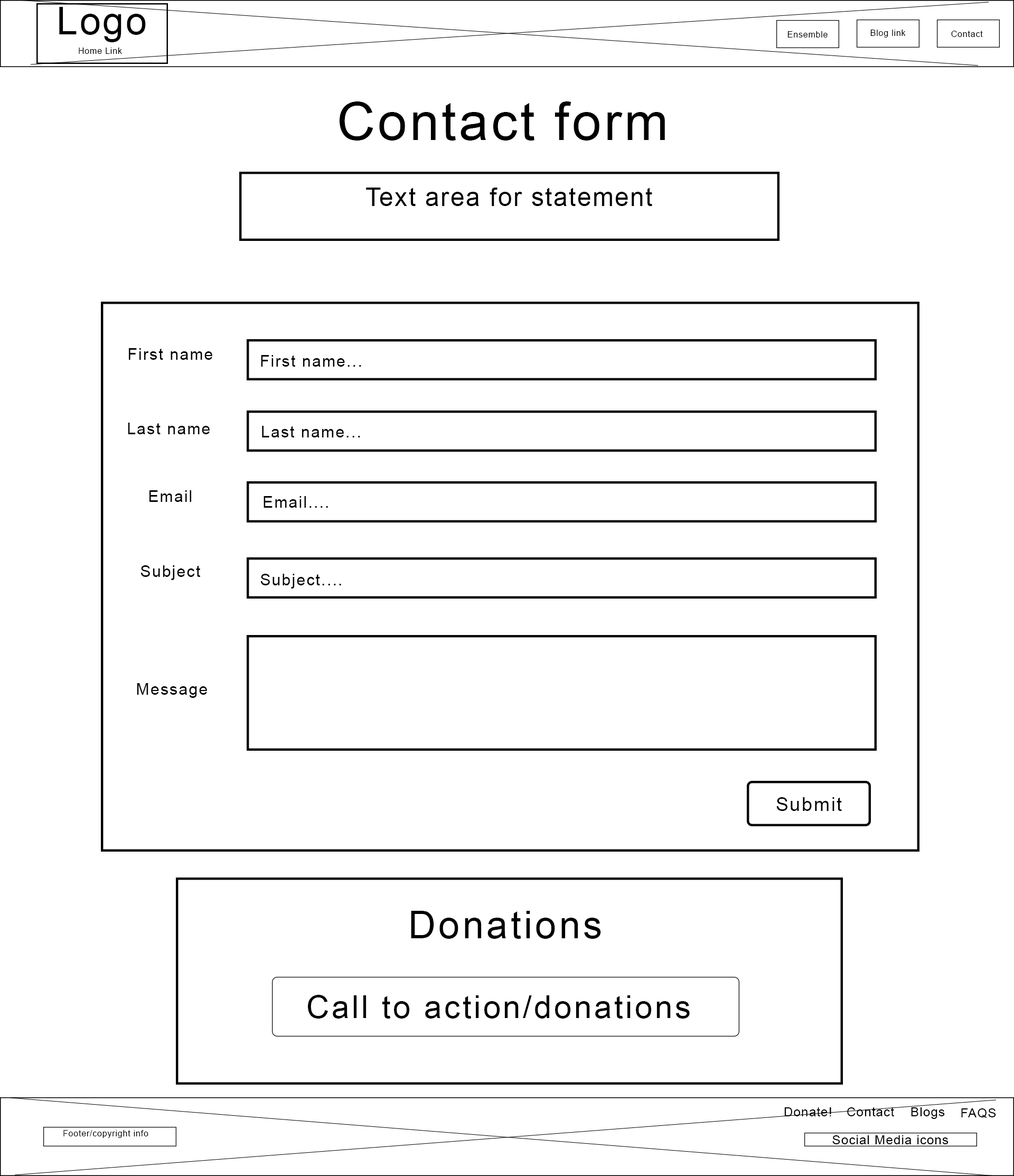
<style>
.page{position:relative;width:1014px;height:1176px;background:#ffffff}
.page>*{position:absolute;margin:0}
.t1{font:38px "ArialMT";letter-spacing:0.05em;color:#000000}
.t2{font:8.5px "ArialMT";letter-spacing:0.05em;color:#000000}
.t3{font:52.8px "ArialMT";letter-spacing:0.05em;color:#000000}
.t4{font:25.4px "ArialMT";letter-spacing:0.05em;color:#000000}
.t5{font:15.8px "ArialMT";letter-spacing:0.075em;color:#000000}
.t6{font:19px "ArialMT";letter-spacing:0.075em;color:#000000}
.t7{font:38px "ArialMT";letter-spacing:0.075em;color:#000000}
.t8{font:31.7px "ArialMT";letter-spacing:0.075em;color:#000000}
.t9{font:12.7px "ArialMT";letter-spacing:0.05em;color:#000000}
</style>
<div class="page">
<p class="t1" style="left:59px;top:7px;width:87px;height:35px">Logo</p>
<p class="t2" style="left:870px;top:30px;width:36px;height:8px">Blog link</p>
<p class="t2" style="left:788px;top:31px;width:40px;height:7px">Ensemble</p>
<p class="t2" style="left:951px;top:31px;width:32px;height:6px">Contact</p>
<p class="t2" style="left:79px;top:48px;width:43px;height:6px">Home Link</p>
<p class="t3" style="left:339px;top:101px;width:326px;height:40px">Contact form</p>
<p class="t4" style="left:366px;top:188px;width:286px;height:18px">Text area for statement</p>
<p class="t5" style="left:129px;top:348px;width:83px;height:12px">First name</p>
<p class="t5" style="left:261px;top:355px;width:100px;height:12px">First name...</p>
<p class="t5" style="left:128px;top:423px;width:82px;height:11px">Last name</p>
<p class="t5" style="left:262px;top:426px;width:98px;height:11px">Last name...</p>
<p class="t5" style="left:149px;top:490px;width:42px;height:12px">Email</p>
<p class="t5" style="left:264px;top:496px;width:64px;height:12px">Email....</p>
<p class="t5" style="left:141px;top:565px;width:59px;height:15px">Subject</p>
<p class="t5" style="left:260px;top:574px;width:81px;height:14px">Subject....</p>
<p class="t5" style="left:137px;top:683px;width:70px;height:15px">Message</p>
<p class="t6" style="left:776px;top:797px;width:66px;height:14px">Submit</p>
<p class="t7" style="left:411px;top:911px;width:190px;height:28px">Donations</p>
<p class="t8" style="left:308px;top:995px;width:382px;height:23px">Call to action/donations</p>
<p class="t9" style="left:784px;top:1107px;width:47px;height:9px">Donate!</p>
<p class="t9" style="left:847px;top:1107px;width:47px;height:9px">Contact</p>
<p class="t9" style="left:911px;top:1107px;width:34px;height:12px">Blogs</p>
<p class="t9" style="left:961px;top:1108px;width:35px;height:10px">FAQS</p>
<p class="t2" style="left:63px;top:1130px;width:85px;height:8px">Footer/copyright info</p>
<p class="t9" style="left:832px;top:1135px;width:117px;height:9px">Social Media icons</p>
</div>
